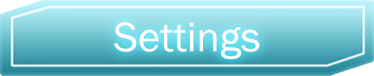
<style>
.page{position:relative;width:374px;height:76px}
.page>*{position:absolute;margin:0}
.t1{font:42.8px "FranklinGothic-Book";color:#fffefe}
</style>
<div class="page">
<p class="t1" style="left:114px;top:22px;width:146px;height:37px">Settings</p>
</div>
